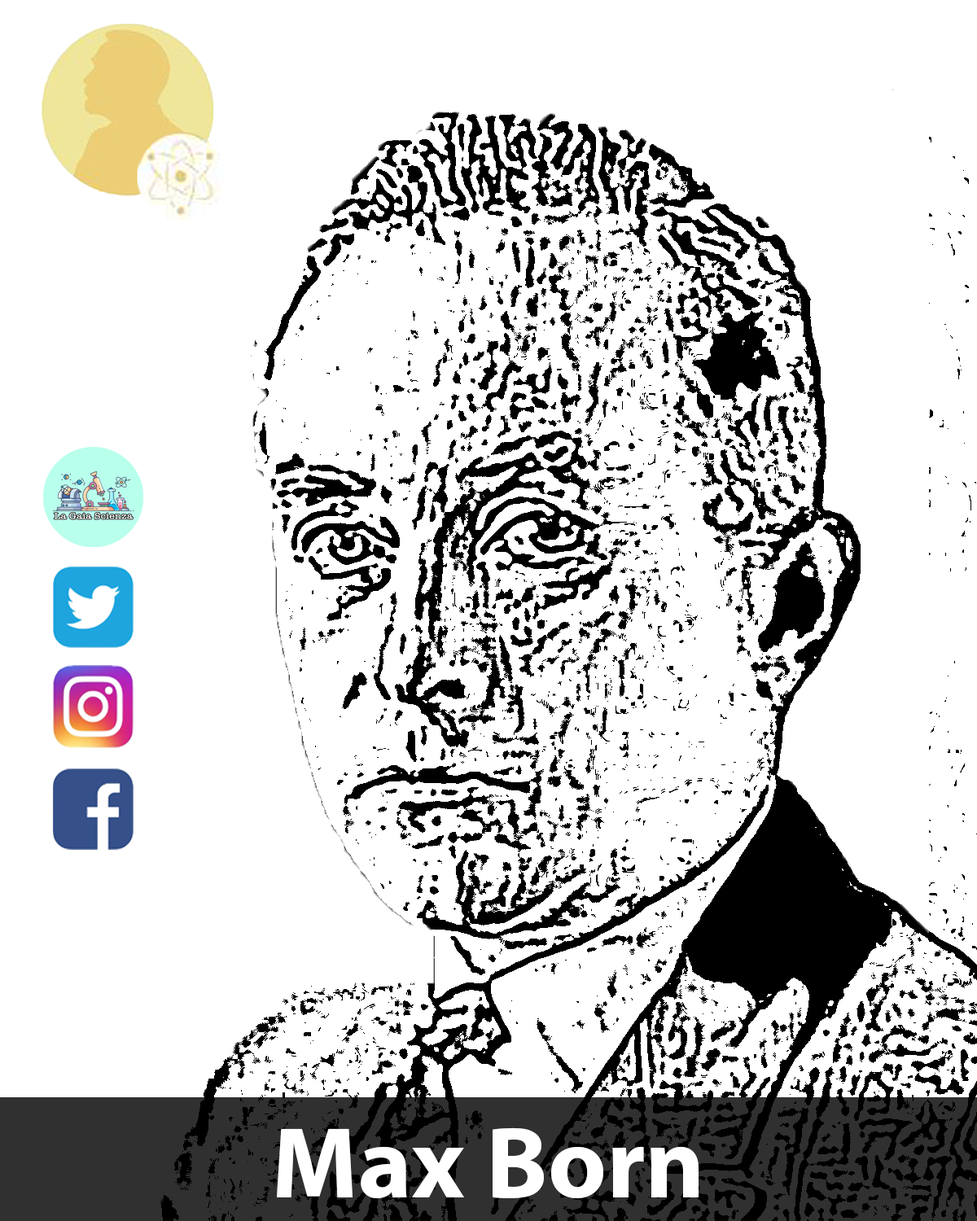
<style>
.page{position:relative;width:977px;height:1221px;background:#ffffff}
.page>*{position:absolute;margin:0}
.t1{font:101.7px "MyriadPro-Bold";color:#ffffff}
</style>
<div class="page">
<p class="t1" style="left:277px;top:1127px;width:421px;height:72px">Max Born</p>
</div>
